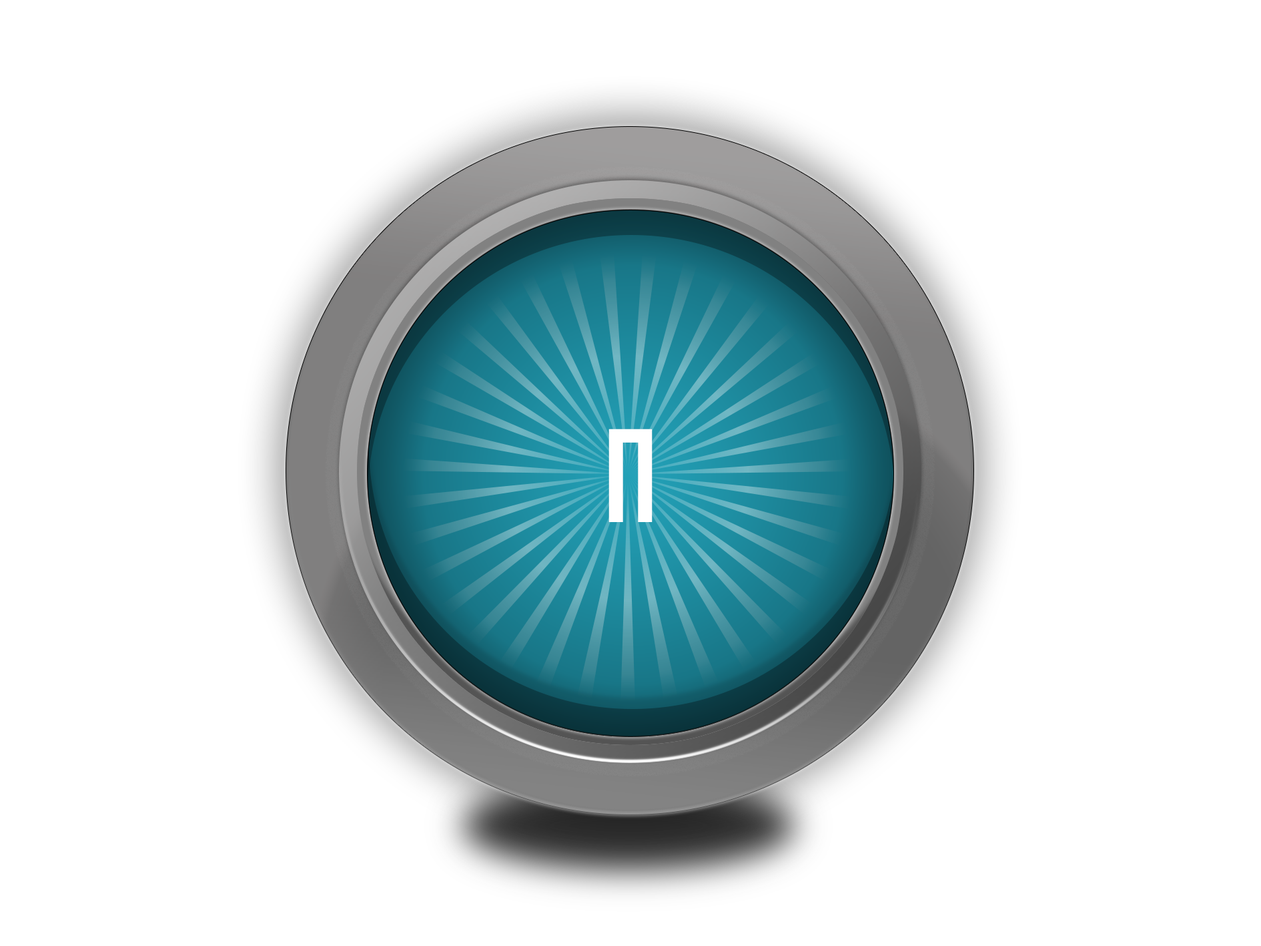
<style>
.page{position:relative;width:1261px;height:946px;background:#ffffff}
.page>*{position:absolute;margin:0}
.t1{font:131.1px "Bahnschrift-SemiBoldCondensed";letter-spacing:-0.06em;color:#ffffff;font-weight:bold}
</style>
<div class="page">
<p class="t1" style="left:609px;top:428px;width:44px;height:94px">П</p>
</div>
